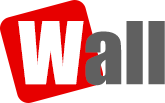
<style>
.page{position:relative;width:165px;height:103px;background:#ffffff}
.page>*{position:absolute;margin:0}
.t1{font:80px "Impact";color:#606060}
.t2{font:80px "Impact";color:#ffffff}
</style>
<div class="page">
<p class="t1" style="left:18px;top:21px;width:147px;height:65px"><span class="t2">W</span>all</p>
</div>
